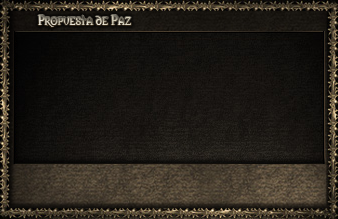
<style>
.page{position:relative;width:338px;height:219px}
.page>*{position:absolute;margin:0}
.t1{font:13px "Morpheus"}
</style>
<div class="page">
<p class="t1" style="left:38px;top:15px;width:93px;height:12px">Propuesta de Paz</p>
</div>
